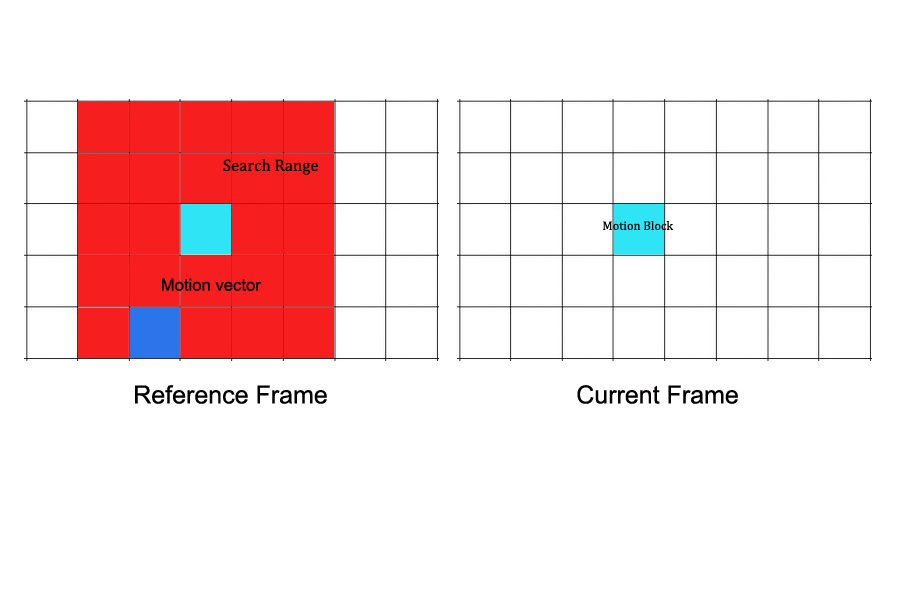
<style>
.page{position:relative;width:900px;height:600px;background:#ffffff}
.page>*{position:absolute;margin:0}
.t1{font:16.7px "Cambria";color:#030000}
.t2{font:16.7px "ArialMT";color:#010307}
.t3{font:25px "ArialMT";color:#030000}
</style>
<div class="page">
<p class="t1" style="left:223px;top:159px;width:95px;height:16px">Search Range</p>
<p class="t2" style="left:162px;top:278px;width:100px;height:13px">Motion vector</p>
<p class="t3" style="left:135px;top:385px;width:192px;height:19px">Reference Frame</p>
</div>
